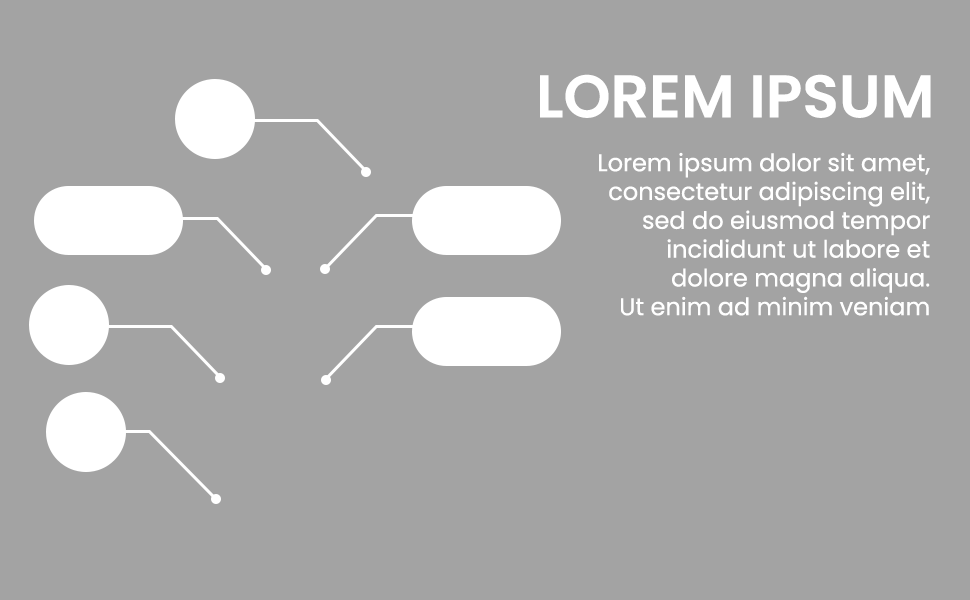
<style>
.page{position:relative;width:970px;height:600px;background:#a3a3a3}
.page>*{position:absolute;margin:0}
.t1{font:60px "Poppins-SemiBold";color:#ffffff;text-transform:uppercase}
.t2{font:24px "Poppins-Regular";color:#ffffff}
</style>
<div class="page">
<p class="t1" style="left:540px;top:74px;width:391px;height:44px">LOREM IPSUM</p>
<p class="t2" style="left:599px;top:152px;width:331px;height:164px;text-align:right">Lorem ipsum dolor sit amet,<br>consectetur adipiscing elit,<br>sed do eiusmod tempor<br>incididunt ut labore et<br>dolore magna aliqua.<br>Ut enim ad minim veniam</p>
</div>
